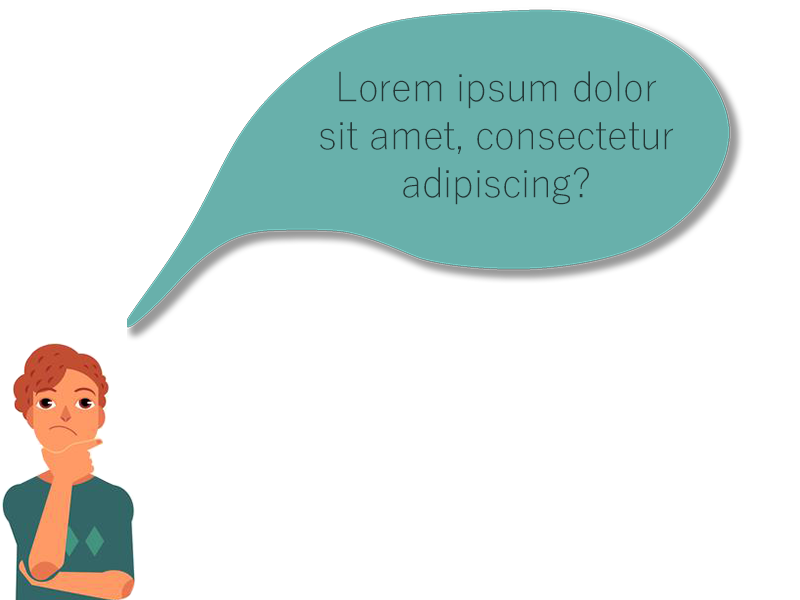
<style>
.page{position:relative;width:800px;height:600px;background:#ffffff}
.page>*{position:absolute;margin:0}
.t1{font:40px "YuGothic-Light";color:#243837}
</style>
<div class="page">
<p class="t1" style="left:320px;top:71px;width:354px;height:134px;text-align:center">Lorem ipsum dolor sit amet, consectetur adipiscing?</p>
</div>
